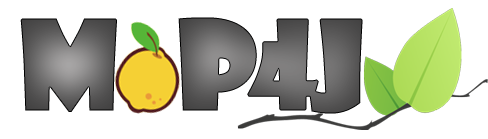
<style>
.page{position:relative;width:488px;height:139px;background:#ffffff}
.page>*{position:absolute;margin:0}
.t1{font:118.3px "ShowcardGothic-Reg";letter-spacing:-0.085em;font-weight:bold}
</style>
<div class="page">
<p class="t1" style="left:20px;top:17px;width:343px;height:97px">M    p4J</p>
</div>
